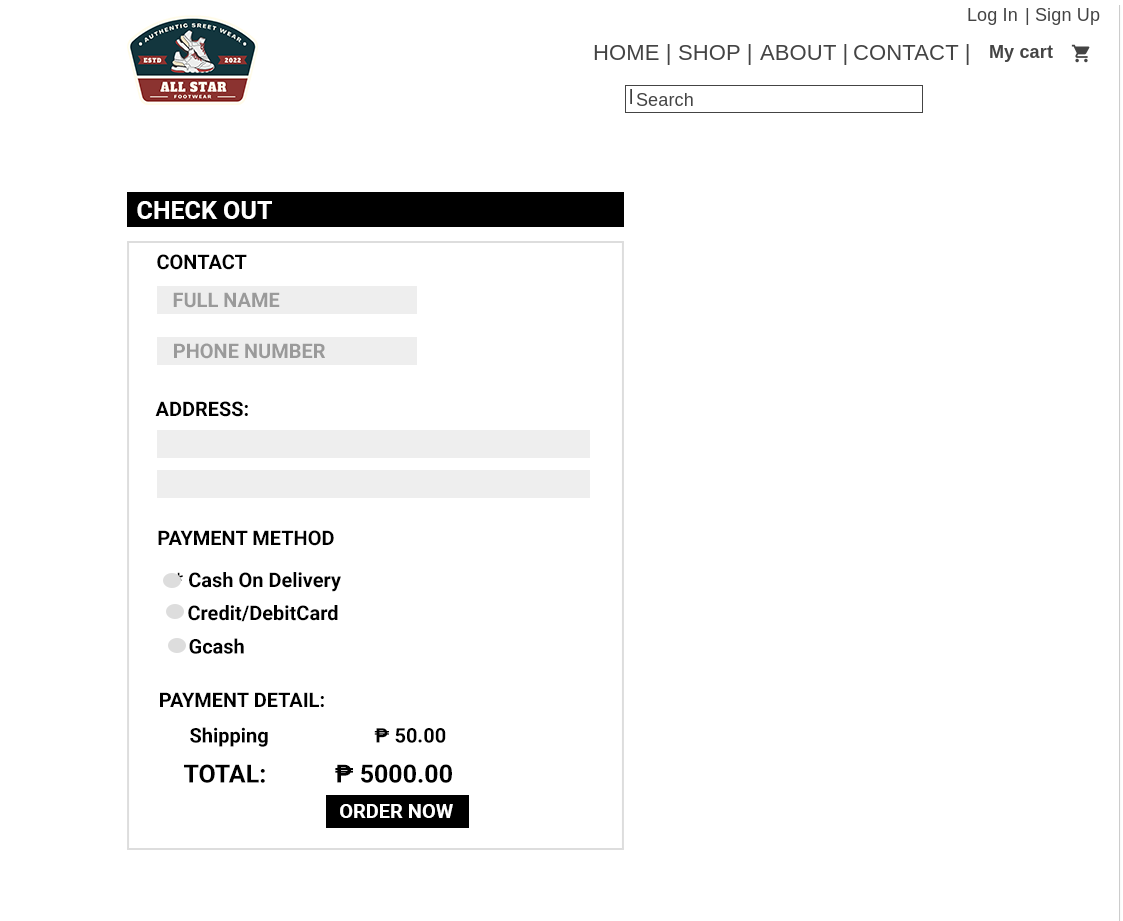
<style>
.page{position:relative;width:1123px;height:921px;background:#ffffff}
.page>*{position:absolute;margin:0}
.t1{font:25px "Roboto-Bold";color:#ffffff}
.t2{font:20px "Roboto-Bold";color:#000000}
.t3{font:20px "Roboto-Bold";color:#9a9a9a}
.t4{font:25px "Roboto-Bold";color:#000000}
.t5{font:20px "Roboto-Bold";color:#ffffff}
</style>
<div class="page">
<p class="t1" style="left:137px;top:201px;width:135px;height:18px">CHECK OUT</p>
<p class="t2" style="left:157px;top:254px;width:90px;height:16px">CONTACT</p>
<p class="t3" style="left:173px;top:292px;width:107px;height:16px">FULL NAME</p>
<p class="t3" style="left:174px;top:343px;width:151px;height:16px">PHONE NUMBER</p>
<p class="t2" style="left:155px;top:401px;width:93px;height:16px">ADDRESS:</p>
<p class="t2" style="left:158px;top:530px;width:176px;height:16px">PAYMENT METHOD</p>
<p class="t2" style="left:174px;top:572px;width:167px;height:20px">* Cash On Delivery</p>
<p class="t2" style="left:173px;top:605px;width:165px;height:17px">* Credit/DebitCard</p>
<p class="t2" style="left:174px;top:638px;width:70px;height:16px">* Gcash</p>
<p class="t2" style="left:160px;top:692px;width:164px;height:15px">PAYMENT DETAIL:</p>
<p class="t2" style="left:190px;top:727px;width:256px;height:20px">Shipping       ₱ 50.00</p>
<p class="t4" style="left:184px;top:764px;width:268px;height:19px">TOTAL:             ₱ 5000.00</p>
<p class="t5" style="left:340px;top:804px;width:113px;height:14px">ORDER NOW</p>
</div>
